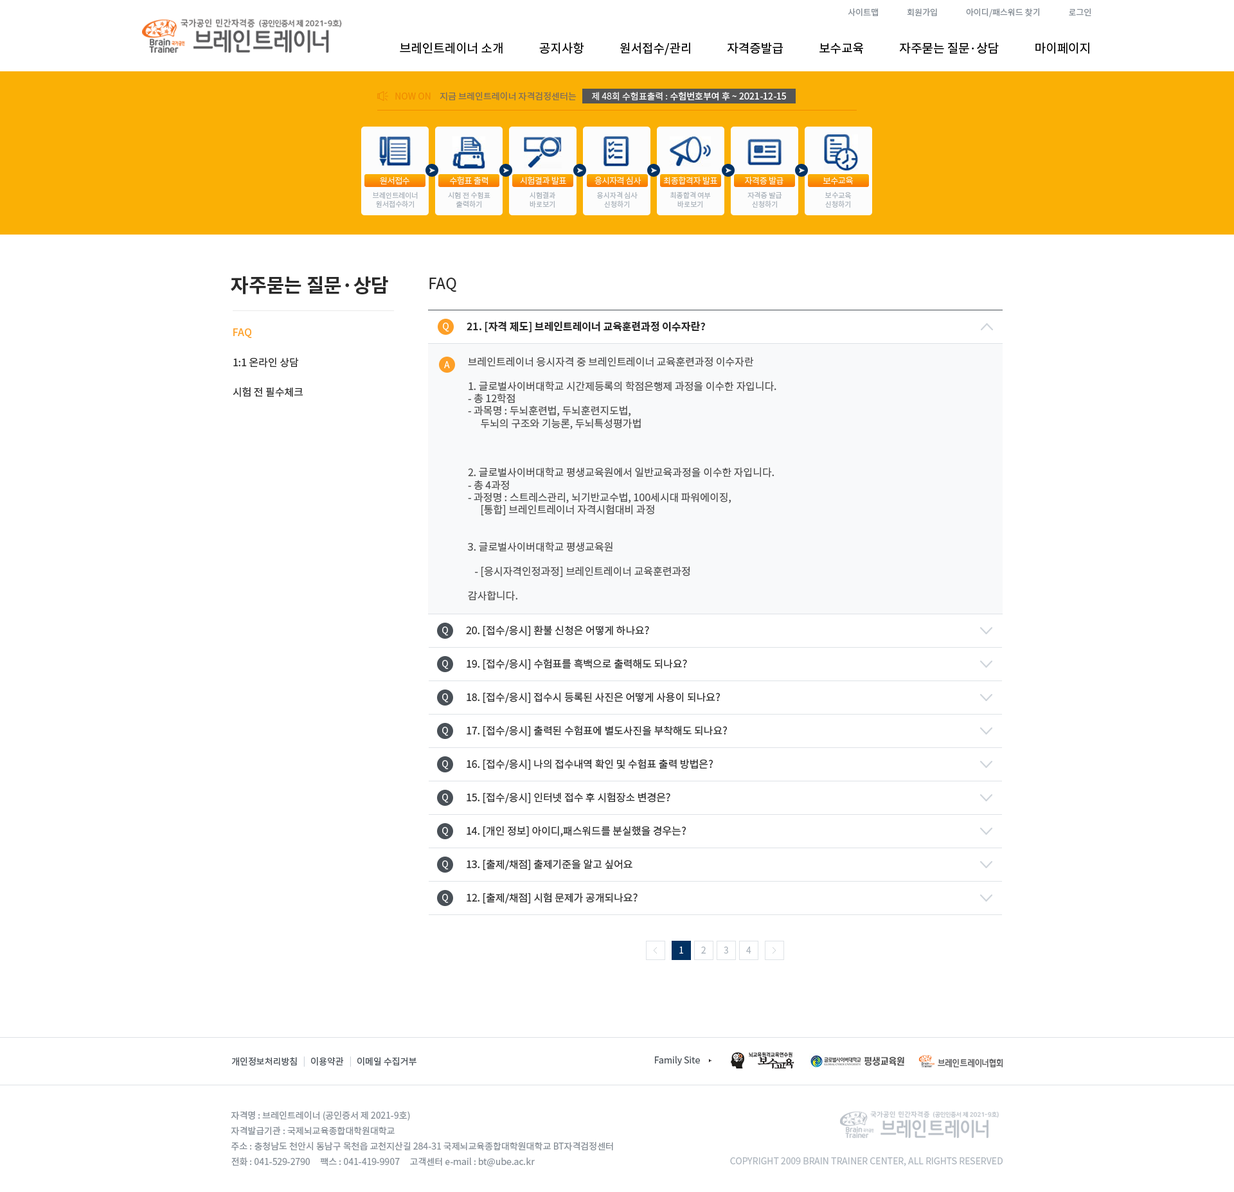
<style>
.page{position:relative;width:1234px;height:1192px;background:#ffffff}
.page>*{position:absolute;margin:0}
.t1{font:8.4px "NotoSansCJKkr-Regular";letter-spacing:0.001em;color:#868e96}
.t2{font:12.2px "NotoSansCJKkr-Regular";color:#000000}
.t3{font:9px "NotoSansCJKkr-Regular";color:#f08c00}
.t4{font:9px "NotoSansCJKkr-Regular";color:#7c6d5d}
.t5{font:9px "NotoSansCJKkr-Medium";color:#f8f8f8}
.t6{font:9px "NotoSansCJKkr-Regular";color:#f8f8f8}
.t7{font:8.4px "NotoSansCJKkr-Light";letter-spacing:-0.025em;color:#fcfcfc}
.t8{font:7.1px/9px "NotoSansCJKkr-Regular";color:#adb5bd}
.t9{font:19.3px "NotoSansCJKkr-Bold";color:#2b2b2b}
.t10{font:15.4px "NotoSansCJKkr-Regular";color:#2b2b2b}
.t11{font:10.3px "NotoSansCJKkr-Medium";color:#fd9f27}
.t12{font:9px "NotoSansCJKkr-Regular";color:#ffffff;text-transform:uppercase}
.t13{font:10.3px "NotoSansCJKkr-Bold";color:#2b2b2b;text-transform:uppercase}
.t14{font:10.3px "NotoSansCJKkr-Regular";color:#2b2b2b}
.t15{font:10.3px "NotoSansCJKkr-Regular";color:#4f4f4f;text-transform:uppercase}
.t16{font:10.3px "NotoSansCJKkr-Regular";color:#2b2b2b;text-transform:uppercase}
.t17{font:9px "NotoSansCJKkr-Regular";color:#ffffff}
.t18{font:9px "NotoSansCJKkr-Regular";color:#adb5bd}
.t19{font:9px "NotoSansCJKkr-Regular";color:#495057}
.t20{font:9px "NotoSansCJKkr-Regular";color:#ced4da}
.t21{font:9px/15.4px "NotoSansCJKkr-Regular";color:#868e96}
</style>
<div class="page">
<p class="t1" style="left:848px;top:8px;width:244px;height:9px">사이트맵               회원가입               아이디/패스워드 찾기               로그인</p>
<p class="t2" style="left:400px;top:42px;width:690px;height:13px">브레인트레이너 소개             공지사항             원서접수/관리             자격증발급             보수교육             자주묻는 질문·상담             마이페이지</p>
<p class="t3" style="left:395px;top:93px;width:36px;height:7px">NOW ON</p>
<p class="t4" style="left:440px;top:92px;width:137px;height:9px">지금 브레인트레이너 자격검정센터는</p>
<p class="t5" style="left:592px;top:92px;width:194px;height:9px"><span class="t6">제 48회 수험표출력 : </span>수험번호부여 후 ~ 2021-12-15</p>
<p class="t7" style="left:380px;top:177px;width:30px;height:8px">원서접수</p>
<p class="t7" style="left:450px;top:176px;width:38px;height:9px">수험표 출력</p>
<p class="t7" style="left:520px;top:176px;width:46px;height:8px">시험결과 발표</p>
<p class="t7" style="left:595px;top:176px;width:47px;height:9px">응시자격 심사</p>
<p class="t7" style="left:663px;top:176px;width:54px;height:9px">최종합격자 발표</p>
<p class="t7" style="left:745px;top:176px;width:39px;height:9px">자격증 발급</p>
<p class="t7" style="left:823px;top:177px;width:30px;height:8px">보수교육</p>
<p class="t8" style="left:373px;top:192px;width:45px;height:16px;text-align:center">브레인트레이너<br>원서접수하기</p>
<p class="t8" style="left:448px;top:192px;width:43px;height:16px;text-align:center">시험 전 수험표<br>출력하기</p>
<p class="t8" style="left:530px;top:192px;width:25px;height:16px;text-align:center">시험결과<br>바로보기</p>
<p class="t8" style="left:597px;top:192px;width:41px;height:16px;text-align:center">응시자격 심사<br>신청하기</p>
<p class="t8" style="left:670px;top:192px;width:41px;height:16px;text-align:center">최종합격 여부<br>바로보기</p>
<p class="t8" style="left:748px;top:192px;width:34px;height:16px;text-align:center">자격증 발급<br>신청하기</p>
<p class="t8" style="left:825px;top:192px;width:27px;height:16px;text-align:center">보수교육<br>신청하기</p>
<p class="t9" style="left:231px;top:276px;width:157px;height:18px">자주묻는 질문·상담</p>
<p class="t10" style="left:429px;top:278px;width:27px;height:14px">FAQ</p>
<p class="t11" style="left:233px;top:328px;width:19px;height:10px">FAQ</p>
<p class="t12" style="left:443px;top:323px;width:6px;height:9px">q</p>
<p class="t13" style="left:467px;top:321px;width:238px;height:11px">21. [자격 제도] 브레인트레이너 교육훈련과정 이수자란?</p>
<p class="t14" style="left:233px;top:357px;width:66px;height:11px">1:1 온라인 상담</p>
<p class="t12" style="left:444px;top:361px;width:6px;height:7px">a</p>
<p class="t15" style="left:467px;top:357px;width:310px;height:244px">브레인트레이너 응시자격 중 브레인트레이너 교육훈련과정 이수자란<br><br>1. 글로벌사이버대학교 시간제등록의 학점은행제 과정을 이수한 자입니다.<br>- 총 12학점<br>- 과목명 : 두뇌훈련법, 두뇌훈련지도법,<br>　 두뇌의 구조와 기능론, 두뇌특성평가법<br><br><br><br>2. 글로벌사이버대학교 평생교육원에서 일반교육과정을 이수한 자입니다.<br>- 총 4과정<br>- 과정명 : 스트레스관리, 뇌기반교수법, 100세시대 파워에이징,<br>　 [통합] 브레인트레이너 자격시험대비 과정<br><br><br>3. 글로벌사이버대학교 평생교육원<br><br>   - [응시자격인정과정] 브레인트레이너 교육훈련과정<br><br>감사합니다.</p>
<p class="t14" style="left:233px;top:387px;width:70px;height:10px">시험 전 필수체크</p>
<p class="t12" style="left:442px;top:627px;width:7px;height:9px">q</p>
<p class="t16" style="left:466px;top:626px;width:183px;height:10px">20. [접수/응시] 환불 신청은 어떻게 하나요?</p>
<p class="t12" style="left:442px;top:660px;width:7px;height:9px">q</p>
<p class="t16" style="left:467px;top:659px;width:220px;height:11px">19. [접수/응시] 수험표를 흑백으로 출력해도 되나요?</p>
<p class="t12" style="left:442px;top:694px;width:7px;height:9px">q</p>
<p class="t16" style="left:467px;top:692px;width:253px;height:11px">18. [접수/응시] 접수시 등록된 사진은 어떻게 사용이 되나요?</p>
<p class="t16" style="left:467px;top:726px;width:260px;height:11px">17. [접수/응시] 출력된 수험표에 별도사진을 부착해도 되나요?</p>
<p class="t12" style="left:442px;top:727px;width:7px;height:9px">q</p>
<p class="t12" style="left:442px;top:760px;width:7px;height:10px">q</p>
<p class="t16" style="left:467px;top:759px;width:246px;height:11px">16. [접수/응시] 나의 접수내역 확인 및 수험표 출력 방법은?</p>
<p class="t12" style="left:442px;top:794px;width:7px;height:9px">q</p>
<p class="t16" style="left:467px;top:793px;width:203px;height:11px">15. [접수/응시] 인터넷 접수 후 시험장소 변경은?</p>
<p class="t12" style="left:442px;top:827px;width:7px;height:9px">q</p>
<p class="t16" style="left:467px;top:826px;width:219px;height:11px">14. [개인 정보] 아이디,패스워드를 분실했을 경우는?</p>
<p class="t12" style="left:442px;top:861px;width:7px;height:9px">q</p>
<p class="t16" style="left:467px;top:860px;width:166px;height:10px">13. [출제/채점] 출제기준을 알고 싶어요</p>
<p class="t16" style="left:467px;top:893px;width:171px;height:11px">12. [출제/채점] 시험 문제가 공개되나요?</p>
<p class="t12" style="left:442px;top:894px;width:7px;height:9px">q</p>
<p class="t17" style="left:680px;top:947px;width:3px;height:7px">1</p>
<p class="t18" style="left:701px;top:947px;width:5px;height:7px">2</p>
<p class="t18" style="left:724px;top:947px;width:4px;height:7px">3</p>
<p class="t18" style="left:746px;top:947px;width:6px;height:7px">4</p>
<p class="t19" style="left:231px;top:1058px;width:66px;height:8px">개인정보처리방침</p>
<p class="t20" style="left:303px;top:1057px;width:2px;height:10px">|</p>
<p class="t19" style="left:311px;top:1058px;width:33px;height:8px">이용약관</p>
<p class="t20" style="left:350px;top:1057px;width:1px;height:10px">|</p>
<p class="t19" style="left:357px;top:1058px;width:60px;height:8px">이메일 수집거부</p>
<p class="t19" style="left:655px;top:1056px;width:45px;height:10px">Family Site</p>
<p class="t21" style="left:231px;top:1112px;width:382px;height:55px">자격명 : 브레인트레이너 (공인증서 제 2021-9호)<br>자격발급기관 : 국제뇌교육종합대학원대학교<br>주소 : 충청남도 천안시 동남구 목천읍 교천지산길 284-31 국제뇌교육종합대학원대학교 BT자격검정센터<br>전화 : 041-529-2790     팩스 : 041-419-9907     고객센터 e-mail : bt@ube.ac.kr</p>
<p class="t18" style="left:730px;top:1158px;width:273px;height:9px">COPYRIGHT 2009 BRAIN TRAINER CENTER, ALL RIGHTS RESERVED</p>
</div>
